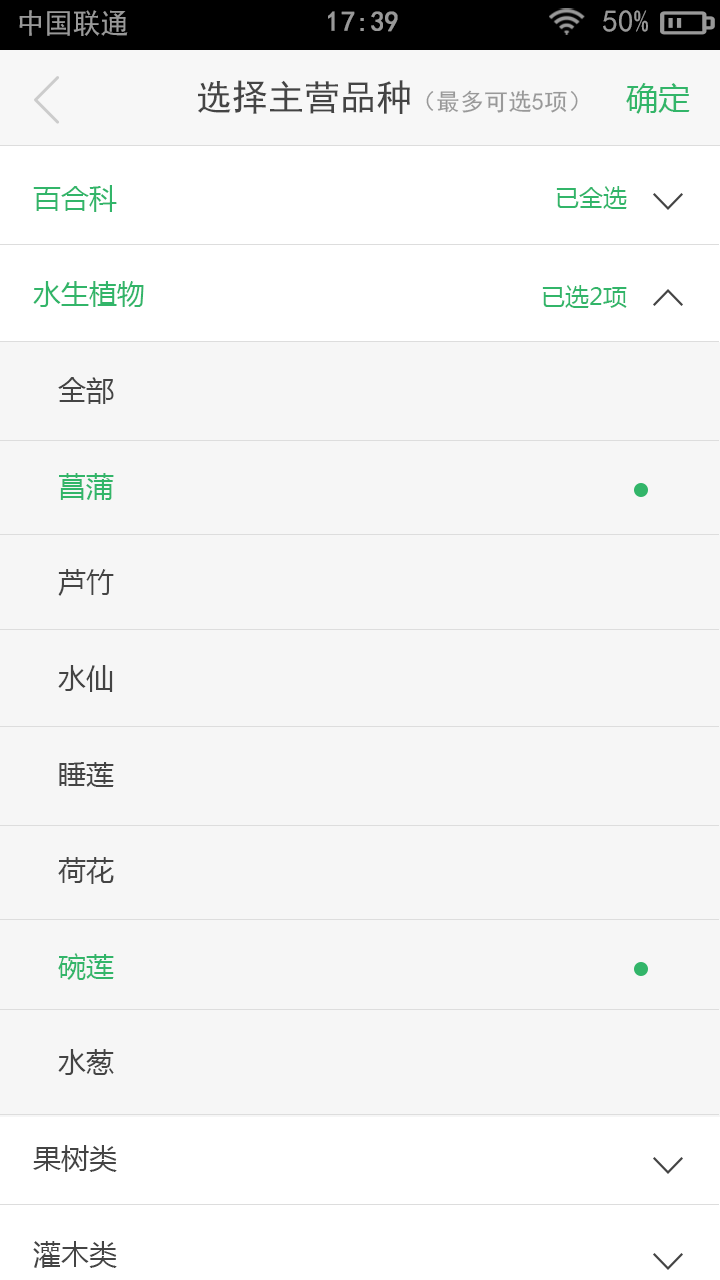
<style>
.page{position:relative;width:720px;height:1280px;background:#f6f6f6}
.page>*{position:absolute;margin:0}
.t1{font:28px "SimHei";color:#999999}
.t2{font:28px "SimHei";color:#999999;font-weight:bold}
.t3{font:31px "SimHei";color:#999999}
.t4{font:24px "SimHei";color:#999999}
.t5{font:36px "SimHei";color:#999999}
.t6{font:36px "SimHei";color:#444444}
.t7{font:32px "MicrosoftYaHei";color:#32b569}
.t8{font:28px/96px "MicrosoftYaHei";color:#444444}
.t9{font:28px/96px "MicrosoftYaHei";color:#32b569}
.t10{font:24px "MicrosoftYaHei";color:#32b569}
</style>
<div class="page">
<p class="t1" style="left:19px;top:10px;width:109px;height:26px">中国联通</p>
<p class="t2" style="left:328px;top:11px;width:70px;height:21px">17:39</p>
<p class="t3" style="left:603px;top:10px;width:45px;height:22px">50%</p>
<p class="t4" style="left:198px;top:80px;width:380px;height:34px"><span class="t5">    </span><span class="t6">选择主营品种</span>（最多可选5项）</p>
<p class="t7" style="left:626px;top:83px;width:64px;height:31px">确定</p>
<p class="t8" style="left:33px;top:185px;width:111px;height:1083px"><span class="t9">百合科<br>水生植物<br></span>   全部<br>   <span class="t9">菖蒲<br></span>   芦竹<br>   水仙<br>   睡莲<br>   荷花<br>   <span class="t9">碗莲<br></span>   水葱<br>果树类<br>灌木类</p>
<p class="t10" style="left:556px;top:186px;width:71px;height:23px">已全选</p>
<p class="t10" style="left:542px;top:285px;width:85px;height:23px">已选2项</p>
</div>
